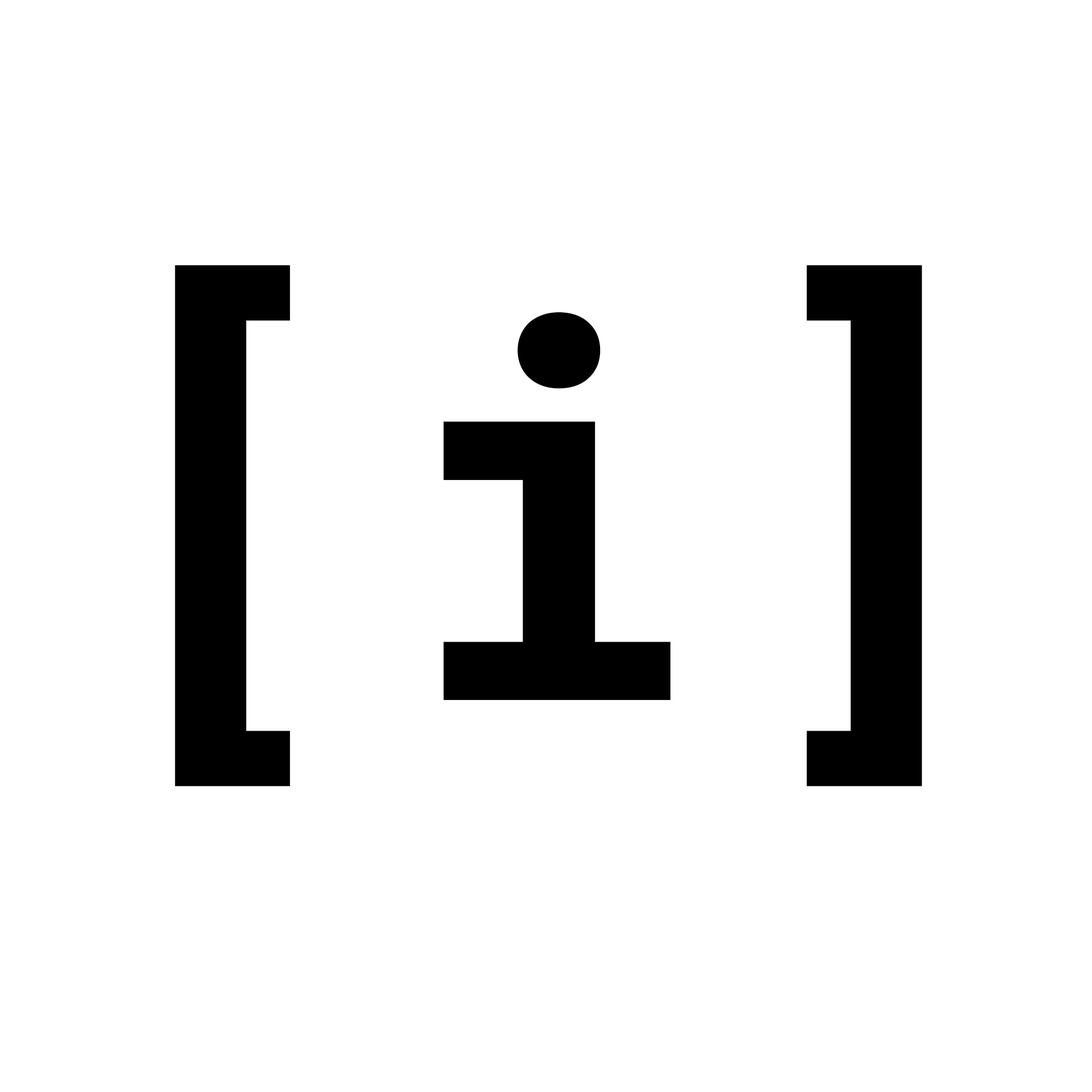
<style>
.page{position:relative;width:1092px;height:1092px;background:#ffffff}
.page>*{position:absolute;margin:0}
.t1{font:526.7px "RobotoMono-Bold";color:#000000}
</style>
<div class="page">
<p class="t1" style="left:175px;top:265px;width:747px;height:521px">[i]</p>
</div>
